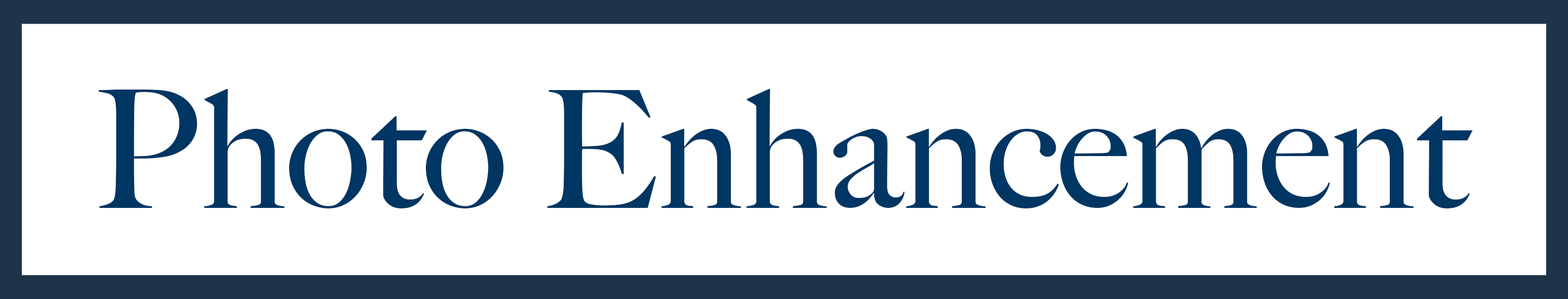
<style>
.page{position:relative;width:1568px;height:299px;background:#ffffff}
.page>*{position:absolute;margin:0}
.t1{font:163.7px "BigCaslon-Medium";color:#003663}
</style>
<div class="page">
<p class="t1" style="left:98px;top:89px;width:1375px;height:120px">Photo Enhancement</p>
</div>
